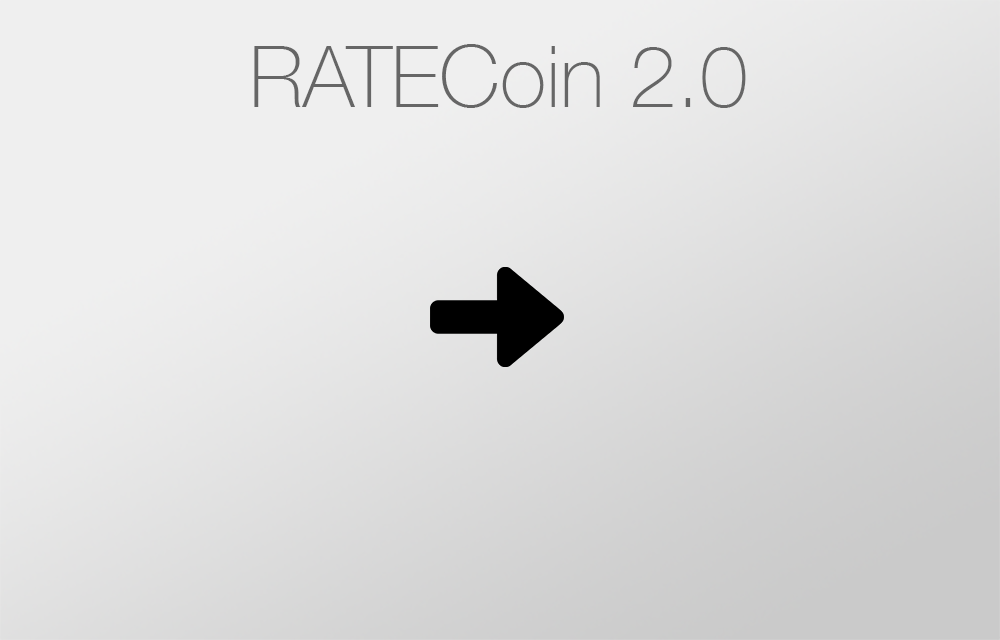
<style>
.page{position:relative;width:1000px;height:640px}
.page>*{position:absolute;margin:0}
.t1{font:85.7px "HelveticaNeue-Thin";color:#666666}
</style>
<div class="page">
<p class="t1" style="left:254px;top:44px;width:492px;height:64px">RATECoin 2.0</p>
</div>
